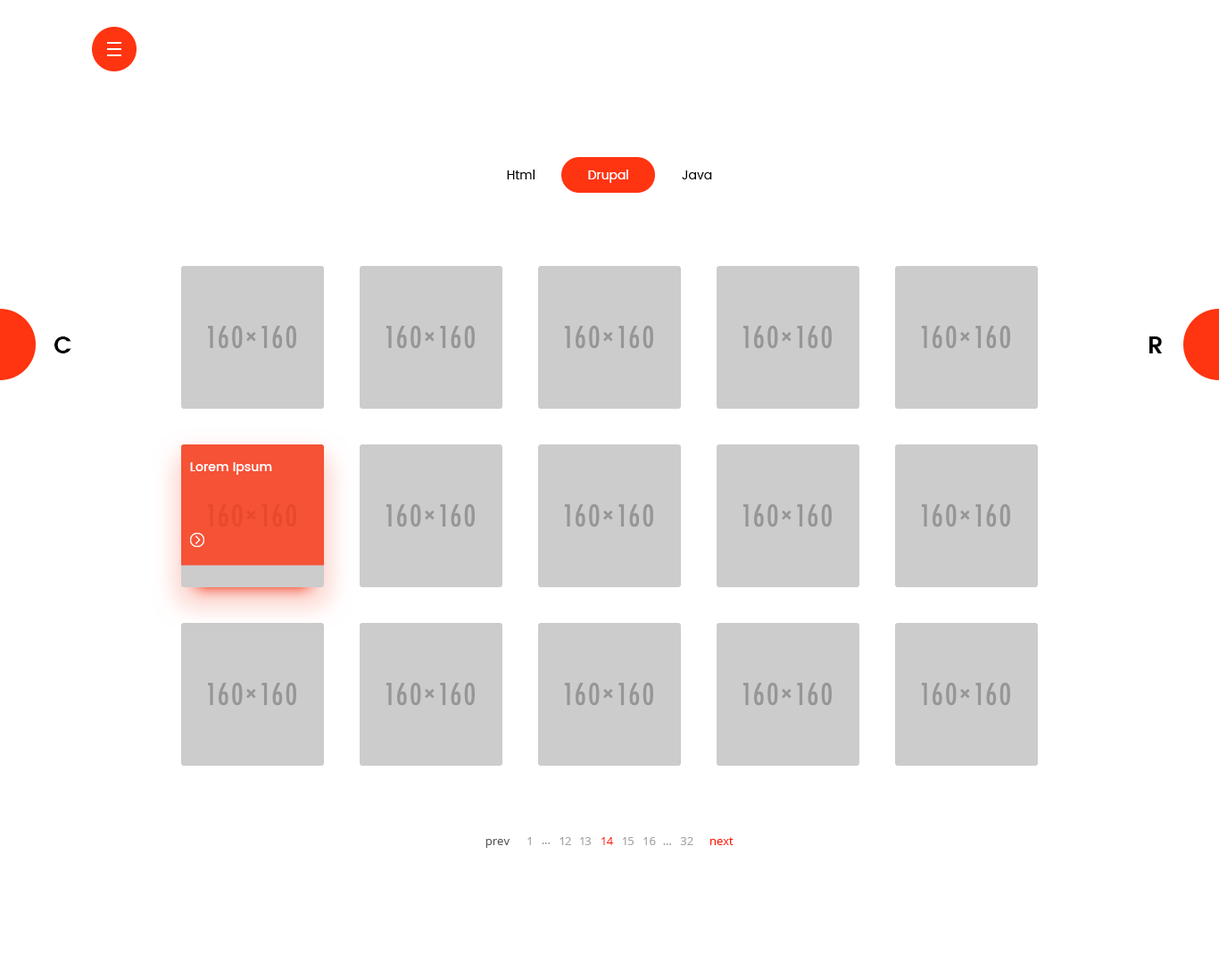
<style>
.page{position:relative;width:1219px;height:979px;background:#ffffff}
.page>*{position:absolute;margin:0}
.t1{font:12.5px "Poppins-Regular";color:#000000}
.t2{font:12.5px "Poppins-Regular";color:#ffffff}
.t3{font:24.1px "Poppins-SemiBold";color:#000000}
.t4{font:12.5px "Poppins-Medium";color:#ffffff}
.t5{font:11.6px "OpenSans";color:#585858}
.t6{font:11.6px "OpenSans"}
.t7{font:11.6px "OpenSans";color:#a3a3a3}
.t8{font:11.6px "OpenSans";color:#ff1800}
</style>
<div class="page">
<p class="t1" style="left:507px;top:169px;width:27px;height:10px">Html</p>
<p class="t2" style="left:588px;top:169px;width:40px;height:14px">Drupal</p>
<p class="t1" style="left:682px;top:170px;width:30px;height:9px">Java</p>
<p class="t3" style="left:54px;top:336px;width:17px;height:17px">C</p>
<p class="t3" style="left:1149px;top:336px;width:13px;height:17px">R</p>
<p class="t4" style="left:190px;top:462px;width:82px;height:13px">Lorem Ipsum</p>
<p class="t5" style="left:485px;top:839px;width:24px;height:8px">prev</p>
<p class="t6" style="left:527px;top:837px;width:4px;height:8px">1</p>
<p class="t7" style="left:541px;top:842px;width:9px;height:2px">...</p>
<p class="t7" style="left:559px;top:837px;width:12px;height:8px">12</p>
<p class="t7" style="left:580px;top:837px;width:11px;height:8px">13</p>
<p class="t8" style="left:601px;top:837px;width:12px;height:8px">14</p>
<p class="t7" style="left:622px;top:837px;width:11px;height:8px">15</p>
<p class="t7" style="left:643px;top:837px;width:13px;height:8px">16</p>
<p class="t7" style="left:663px;top:843px;width:8px;height:2px">...</p>
<p class="t7" style="left:680px;top:837px;width:13px;height:8px">32</p>
<p class="t8" style="left:710px;top:837px;width:23px;height:8px">next</p>
</div>
